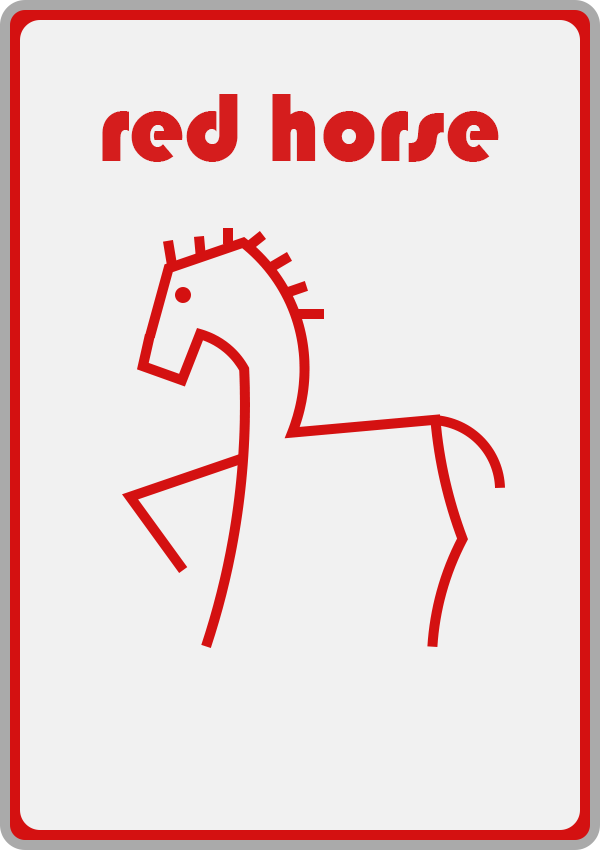
<style>
.page{position:relative;width:600px;height:850px;background:#f1f1f1}
.page>*{position:absolute;margin:0}
.t1{font:100px "Bauhaus93";color:#d51d1d}
</style>
<div class="page">
<p class="t1" style="left:102px;top:94px;width:397px;height:68px">red horse</p>
</div>
